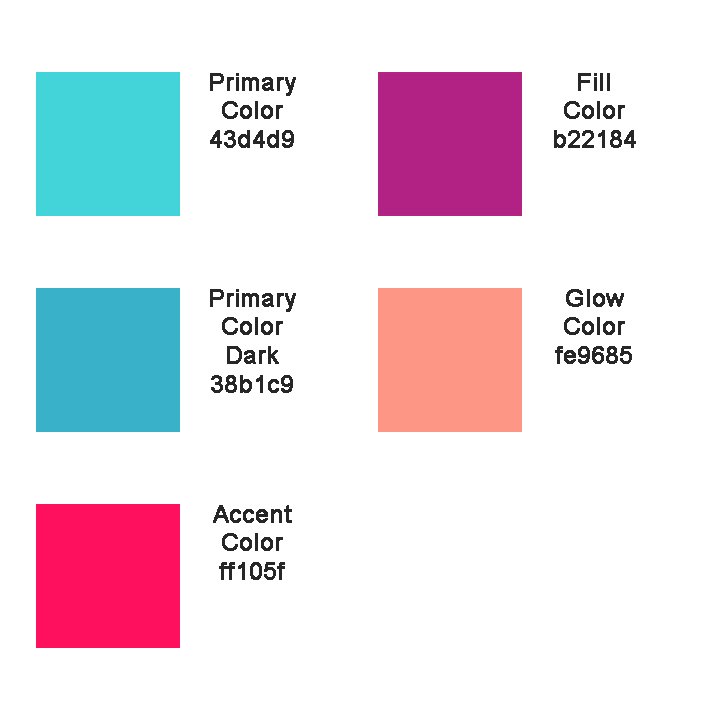
<style>
.page{position:relative;width:720px;height:720px;background:#ffffff}
.page>*{position:absolute;margin:0}
.t1{font:24px "ArialMT";color:#272727;font-weight:bold}
</style>
<div class="page">
<p class="t1" style="left:210px;top:73px;width:86px;height:75px;text-align:center">Primary<br>Color<br>43d4d9</p>
<p class="t1" style="left:554px;top:73px;width:82px;height:75px;text-align:center">Fill<br>Color<br>b22184</p>
<p class="t1" style="left:210px;top:289px;width:86px;height:104px;text-align:center">Primary<br>Color<br>Dark<br>38b1c9</p>
<p class="t1" style="left:555px;top:289px;width:77px;height:75px;text-align:center">Glow<br>Color<br>fe9685</p>
<p class="t1" style="left:213px;top:505px;width:79px;height:75px;text-align:center">Accent<br>Color<br>ff105f</p>
</div>
